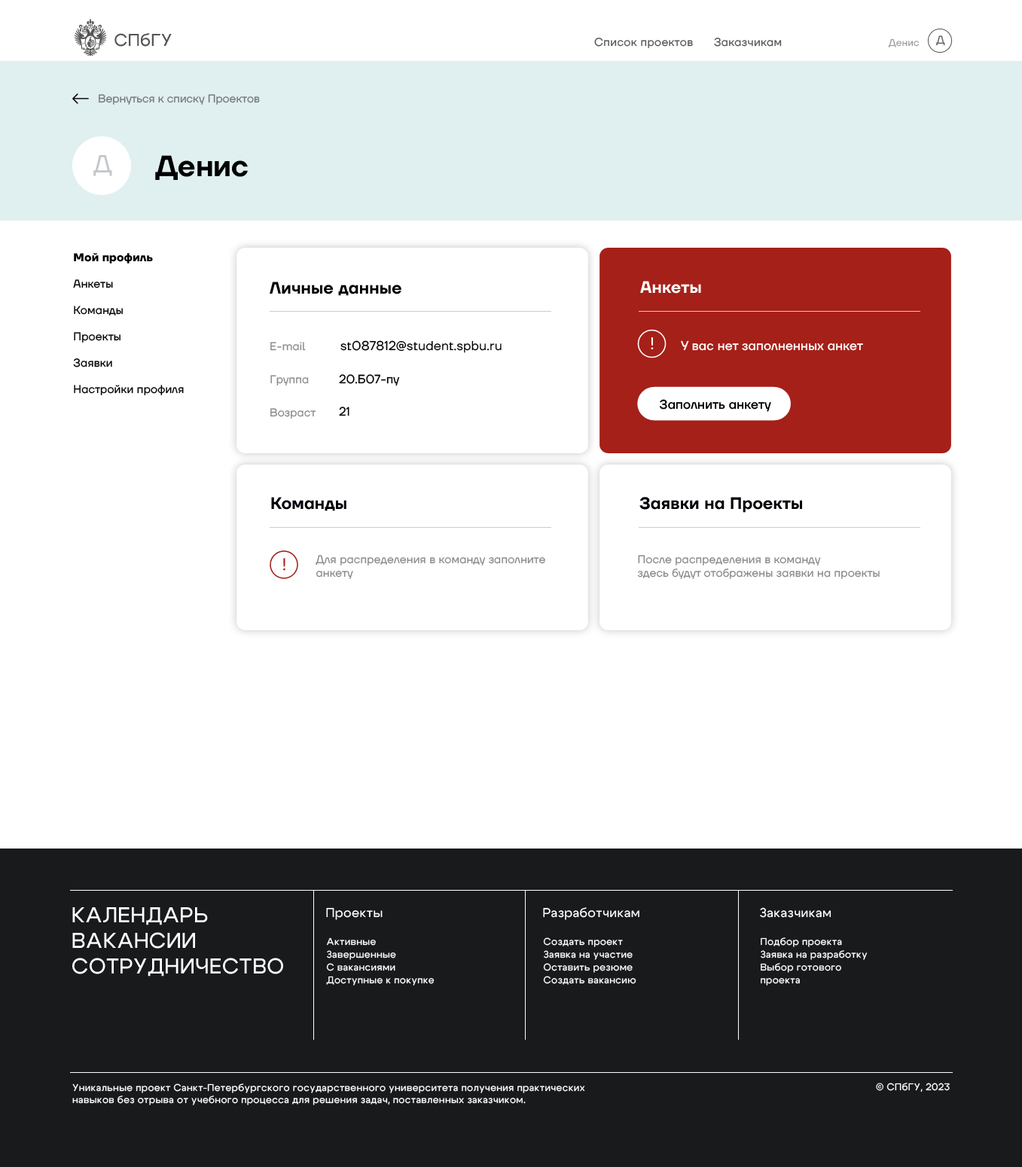
<style>
.page{position:relative;width:1022px;height:1167px;background:#ffffff}
.page>*{position:absolute;margin:0}
.t1{font:17.1px "Cygre-Medium";letter-spacing:0.025em;color:#555555}
.t2{font:11.3px "TTFirsNeue-Regular";letter-spacing:0.025em;color:#555555}
.t3{font:9.8px "TTFirsNeue-Regular";letter-spacing:0.01em;color:#9c9c9c}
.t4{font:11.3px "TTFirsNeue-Regular";color:#636466}
.t5{font:11.3px "TTFirsNeue-Regular";color:#77787b}
.t6{font:24.8px "TTFirsNeue-Regular";color:#c4c6c8}
.t7{font:29.4px "TTFirsNeue-DemiBold";color:#000000}
.t8{font:11.3px/26.4px "TTFirsNeue-Regular";letter-spacing:0.013em;color:#000000}
.t9{font:11.3px/26.4px "TTFirsNeue-Bold";letter-spacing:0.013em;color:#000000}
.t10{font:16.6px "TTFirsNeue-DemiBold";letter-spacing:0.01em;color:#000000}
.t11{font:16.6px "TTFirsNeue-DemiBold";letter-spacing:0.01em;color:#ffffff}
.t12{font:11.3px "TTFirsNeue-Regular";letter-spacing:0.01em;color:#898989}
.t13{font:12.8px "TTFirsNeue-Regular";letter-spacing:0.01em;color:#000000}
.t14{font:12.8px "TTFirsNeue-Medium";letter-spacing:0.01em;color:#ffffff}
.t15{font:12px "TTFirsNeue-Regular";color:#000000}
.t16{font:12.8px "TTFirsNeue-Medium";letter-spacing:0.01em;color:#000000}
.t17{font:16.6px "TTFirsNeue-DemiBold";letter-spacing:0.01em;color:#000007}
.t18{font:21.4px "Cygre-Medium";letter-spacing:0.025em;color:#ffffff}
.t19{font:12.8px "Cygre-Medium";letter-spacing:0.025em;color:#ffffff}
.t20{font:9.8px/12.8px "Cygre-Medium";letter-spacing:0.025em;color:#ffffff}
.t21{font:9.8px "Cygre-Medium";letter-spacing:0.025em;color:#ffffff}
</style>
<div class="page">
<p class="t1" style="left:114px;top:32px;width:58px;height:15px">СПбГУ</p>
<p class="t2" style="left:594px;top:38px;width:188px;height:10px">Список проектов      Заказчикам</p>
<p class="t3" style="left:888px;top:38px;width:31px;height:9px">Денис</p>
<p class="t4" style="left:936px;top:35px;width:9px;height:11px">Д</p>
<p class="t5" style="left:99px;top:94px;width:161px;height:11px">Вернуться к списку Проектов</p>
<p class="t6" style="left:93px;top:155px;width:19px;height:21px">Д</p>
<p class="t7" style="left:155px;top:155px;width:93px;height:25px">Денис</p>
<p class="t8" style="left:73px;top:253px;width:111px;height:142px"><span class="t9">Мой профиль<br></span>Анкеты<br>Команды<br>Проекты<br>Заявки<br>Настройки профиля</p>
<p class="t10" style="left:270px;top:282px;width:131px;height:14px">Личные данные</p>
<p class="t11" style="left:640px;top:281px;width:61px;height:13px">Анкеты</p>
<p class="t12" style="left:270px;top:342px;width:36px;height:9px">E-mail</p>
<p class="t13" style="left:340px;top:340px;width:161px;height:13px">st087812@student.spbu.ru</p>
<p class="t14" style="left:681px;top:340px;width:182px;height:11px">У вас нет заполненных анкет</p>
<p class="t12" style="left:270px;top:375px;width:39px;height:11px">Группа</p>
<p class="t15" style="left:339px;top:374px;width:61px;height:12px">20.Б07-пу</p>
<p class="t16" style="left:659px;top:399px;width:112px;height:13px">Заполнить анкету</p>
<p class="t12" style="left:270px;top:408px;width:46px;height:11px">Возраст</p>
<p class="t15" style="left:339px;top:407px;width:10px;height:9px">21</p>
<p class="t17" style="left:271px;top:497px;width:75px;height:14px">Команды</p>
<p class="t17" style="left:639px;top:497px;width:163px;height:16px">Заявки на Проекты</p>
<p class="t12" style="left:315px;top:555px;width:230px;height:24px">Для распределения в команду заполните<br>анкету</p>
<p class="t12" style="left:637px;top:555px;width:242px;height:24px">После распределения в команду<br>здесь будут отображены заявки на проекты</p>
<p class="t18" style="left:72px;top:907px;width:211px;height:70px">КАЛЕНДАРЬ<br>ВАКАНСИИ<br>СОТРУДНИЧЕСТВО</p>
<p class="t19" style="left:326px;top:907px;width:56px;height:13px">Проекты</p>
<p class="t19" style="left:543px;top:907px;width:96px;height:13px">Разработчикам</p>
<p class="t19" style="left:760px;top:907px;width:71px;height:11px">Заказчикам</p>
<p class="t20" style="left:326px;top:937px;width:108px;height:49px">Активные<br>Завершенные<br>С вакансиями<br>Доступные к покупке</p>
<p class="t20" style="left:543px;top:937px;width:93px;height:48px">Создать проект<br>Заявка на участие<br>Оставить резюме<br>Создать вакансию</p>
<p class="t20" style="left:760px;top:937px;width:107px;height:49px">Подбор проекта<br>Заявка на разработку<br>Выбор готового<br>проекта</p>
<p class="t21" style="left:72px;top:1083px;width:513px;height:22px">Уникальные проект Санкт-Петербургского государственного университета получения практических навыков без отрыва от учебного процесса для решения задач, поставленных заказчиком.</p>
<p class="t21" style="left:876px;top:1083px;width:73px;height:10px">© СПбГУ, 2023</p>
</div>
